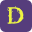
<style>
.page{position:relative;width:32px;height:32px;background:#563d7c}
.page>*{position:absolute;margin:0}
.t1{font:24px "GRAVEDIGGERPERSONALUSE";letter-spacing:0.05em;color:#f6fd3d;text-transform:uppercase}
</style>
<div class="page">
<p class="t1" style="left:7px;top:6px;width:17px;height:18px">D</p>
</div>
